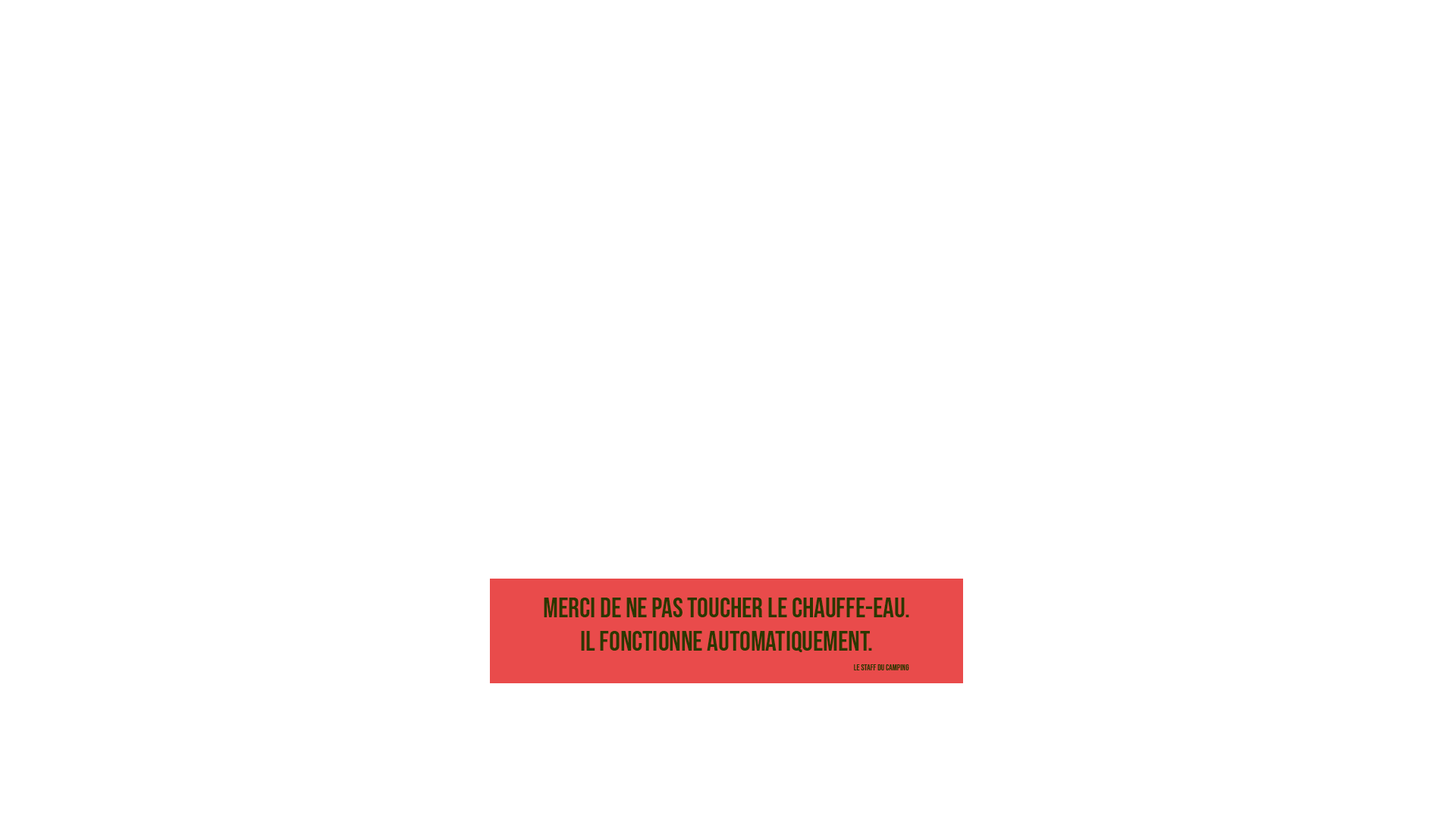
<style>
.page{position:relative;width:1456px;height:819px;background:#ffffff}
.page>*{position:absolute;margin:0}
.t1{font:27.7px "BebasNeue-Regular";color:#2c3700}
.t2{font:8.5px "BebasNeue-Regular";color:#2c3700}
</style>
<div class="page">
<p class="t1" style="left:544px;top:598px;width:365px;height:54px;text-align:center">Merci de ne pas toucher le chauffe-eau.<br>Il fonctionne automatiquement.</p>
<p class="t2" style="left:854px;top:664px;width:55px;height:6px">Le staff du camping</p>
</div>
